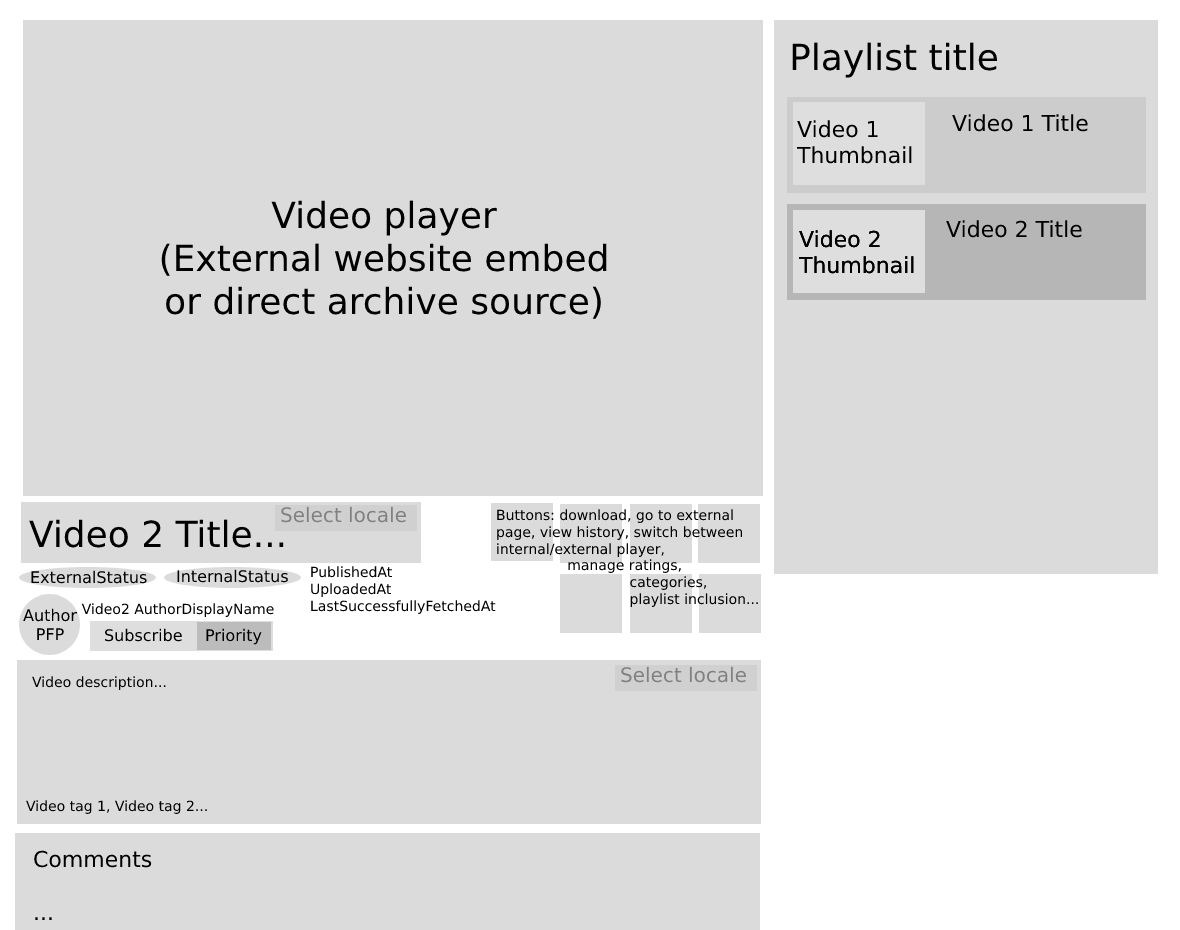
<style>
.page{position:relative;width:1180px;height:930px;background:#dbdbdb}
.page>*{position:absolute;margin:0}
.t1{font:36px "DejaVuSans";color:#000000}
.t2{font:22px "DejaVuSans";color:#000000}
.t3{font:20px "DejaVuSans";color:#818181}
.t4{font:14px "DejaVuSans";color:#000000}
.t5{font:16px "DejaVuSans";color:#000000}
</style>
<div class="page">
<p class="t1" style="left:792px;top:42px;width:205px;height:36px">Playlist title</p>
<p class="t2" style="left:796px;top:120px;width:116px;height:44px">Video 1<br>Thumbnail</p>
<p class="t2" style="left:952px;top:114px;width:136px;height:18px">Video 1 Title</p>
<p class="t1" style="left:161px;top:200px;width:446px;height:119px;text-align:center">Video player<br>(External website embed<br>or direct archive source)</p>
<p class="t2" style="left:946px;top:220px;width:136px;height:18px">Video 2 Title</p>
<p class="t2" style="left:798px;top:230px;width:116px;height:44px">Video 2<br>Thumbnail</p>
<p class="t2" style="left:798px;top:230px;width:116px;height:44px">Video 2<br>Thumbnail</p>
<p class="t3" style="left:281px;top:506px;width:125px;height:17px">Select locale</p>
<p class="t4" style="left:497px;top:509px;width:261px;height:98px">Buttons: download, go to external<br>page, view history, switch between<br>internal/external player,<br>                manage ratings,<br>                              categories,<br>                              playlist inclusion...</p>
<p class="t1" style="left:29px;top:519px;width:255px;height:29px">Video 2 Title...</p>
<p class="t5" style="left:177px;top:569px;width:111px;height:14px">InternalStatus</p>
<p class="t4" style="left:311px;top:566px;width:185px;height:48px">PublishedAt<br>UploadedAt<br>LastSuccessfullyFetchedAt</p>
<p class="t5" style="left:31px;top:570px;width:116px;height:14px">ExternalStatus</p>
<p class="t4" style="left:81px;top:603px;width:193px;height:14px">Video2 AuthorDisplayName</p>
<p class="t5" style="left:23px;top:608px;width:54px;height:32px;text-align:center">Author<br>PFP</p>
<p class="t5" style="left:105px;top:628px;width:77px;height:14px">Subscribe</p>
<p class="t5" style="left:206px;top:628px;width:56px;height:17px">Priority</p>
<p class="t4" style="left:32px;top:676px;width:134px;height:14px">Video description...</p>
<p class="t3" style="left:621px;top:666px;width:125px;height:17px">Select locale</p>
<p class="t4" style="left:26px;top:800px;width:181px;height:14px">Video tag 1, Video tag 2...</p>
<p class="t2" style="left:34px;top:850px;width:118px;height:70px">Comments<br><br>...</p>
</div>
